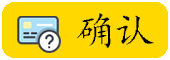
<style>
.page{position:relative;width:170px;height:60px;background:#ffd800}
.page>*{position:absolute;margin:0}
.t1{font:40px "¿¬Ìå";color:#000000}
</style>
<div class="page">
<p class="t1" style="left:76px;top:13px;width:78px;height:35px">确认</p>
</div>
